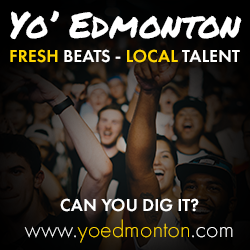
<style>
.page{position:relative;width:250px;height:250px}
.page>*{position:absolute;margin:0}
.t1{font:36px "PermanentMarker-Regular";color:#ffffff}
.t2{font:18px "FuturaPT-Demi";color:#ffffff}
.t3{font:18px "FuturaPT-Demi";color:#ffd700}
.t4{font:18px/26px "FuturaPT-Demi";color:#ffffff}
.t5{font:24px/26px "FuturaPT-Light";color:#ffffff}
.t6{font:24px/26px "FuturaPT-Light";color:#ffd700}
</style>
<div class="page">
<p class="t1" style="left:10px;top:10px;width:232px;height:30px">Yo’ Edmonton</p>
<p class="t2" style="left:10px;top:49px;width:230px;height:14px"><span class="t3">FRESH</span> BEATS - <span class="t3">LOCAL</span> TALENT</p>
<p class="t4" style="left:24px;top:198px;width:209px;height:45px;text-align:center">CAN YOU DIG IT?<br><span class="t5">www.</span><span class="t6">yoedmonton</span><span class="t5">.com</span></p>
</div>
